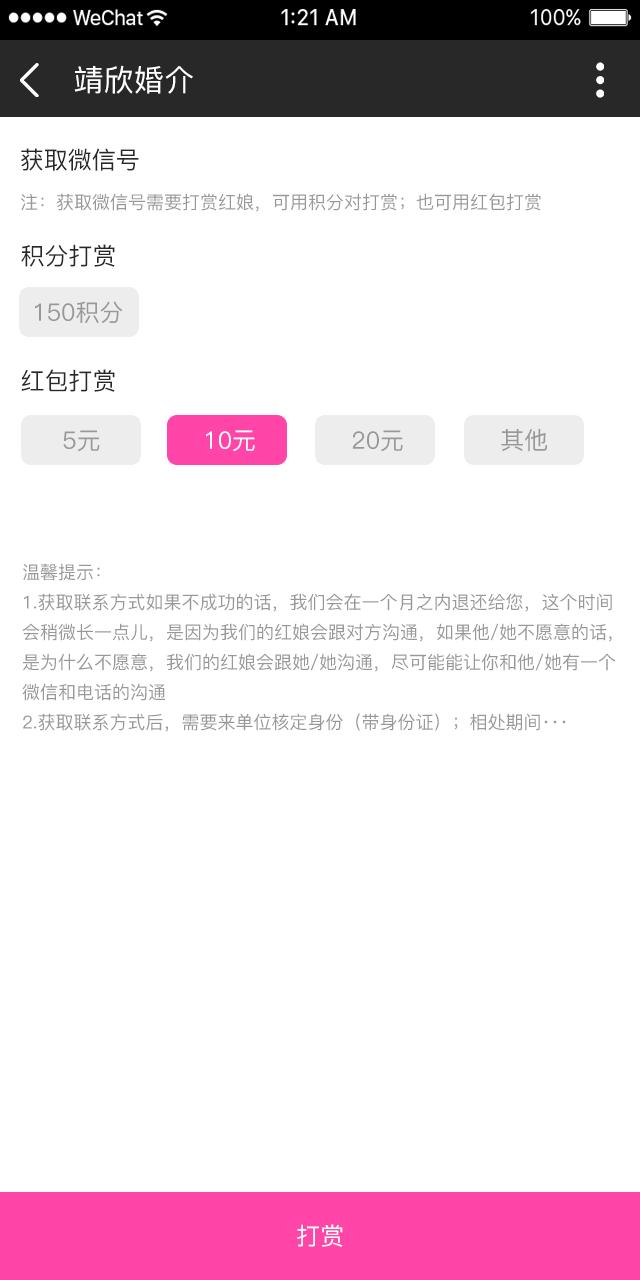
<style>
.page{position:relative;width:640px;height:1280px;background:#ffffff}
.page>*{position:absolute;margin:0}
.t1{font:24px "PingFang-SC-Medium";color:#282828;text-transform:uppercase}
.t2{font:18px "PingFang-SC-Medium";color:#989898;text-transform:uppercase}
.t3{font:24px "PingFang-SC-Medium";color:#989898;text-transform:uppercase}
.t4{font:24px "PingFang-SC-Medium";color:#ffffff;text-transform:uppercase}
.t5{font:18px/30px "PingFang-SC-Medium";color:#989898;text-transform:uppercase}
</style>
<div class="page">
<p class="t1" style="left:21px;top:148px;width:118px;height:23px">获取微信号</p>
<p class="t2" style="left:21px;top:193px;width:520px;height:19px">注：获取微信号需要打赏红娘，可用积分对打赏；也可用红包打赏</p>
<p class="t1" style="left:21px;top:244px;width:94px;height:23px">积分打赏</p>
<p class="t3" style="left:35px;top:301px;width:88px;height:23px">150积分</p>
<p class="t1" style="left:21px;top:369px;width:94px;height:23px">红包打赏</p>
<p class="t3" style="left:63px;top:430px;width:37px;height:22px">5元</p>
<p class="t4" style="left:206px;top:430px;width:49px;height:22px">10元</p>
<p class="t3" style="left:352px;top:430px;width:51px;height:22px">20元</p>
<p class="t3" style="left:501px;top:429px;width:46px;height:23px">其他</p>
<p class="t5" style="left:22px;top:563px;width:594px;height:169px;text-align:justify">温馨提示：<br>1.获取联系方式如果不成功的话，我们会在一个月之内退还给您，这个时间<br>会稍微长一点儿，是因为我们的红娘会跟对方沟通，如果他/她不愿意的话，<br>是为什么不愿意，我们的红娘会跟她/她沟通，尽可能能让你和他/她有一个<br>微信和电话的沟通<br>2.获取联系方式后，需要来单位核定身份（带身份证）；相处期间···</p>
<p class="t4" style="left:297px;top:1224px;width:46px;height:23px">打赏</p>
</div>
